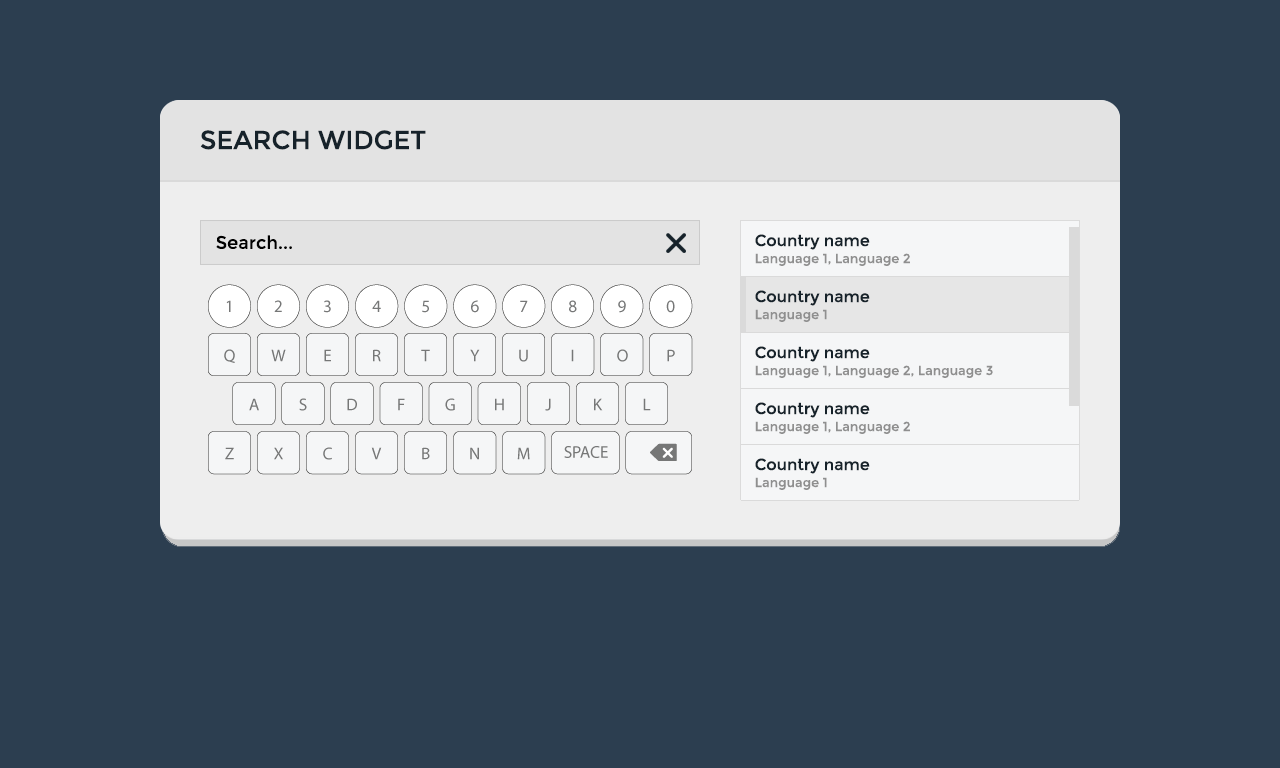
<style>
.page{position:relative;width:1280px;height:768px;background:#2c3e50}
.page>*{position:absolute;margin:0}
.t1{font:26px "Montserrat-Regular";color:#16222a}
.t2{font:18px "Montserrat-Regular";color:#000000}
.t3{font:16px "Montserrat-Regular";color:#16222a}
.t4{font:13px "Montserrat-Regular";color:#8f8f8f}
</style>
<div class="page">
<p class="t1" style="left:200px;top:130px;width:226px;height:20px">SEARCH WIDGET</p>
<p class="t2" style="left:216px;top:235px;width:76px;height:14px">Search...</p>
<p class="t3" style="left:755px;top:234px;width:115px;height:16px">Country name</p>
<p class="t4" style="left:755px;top:253px;width:155px;height:13px">Language 1, Language 2</p>
<p class="t3" style="left:755px;top:290px;width:115px;height:16px">Country name</p>
<p class="t3" style="left:755px;top:290px;width:115px;height:16px">Country name</p>
<p class="t4" style="left:755px;top:309px;width:72px;height:13px">Language 1</p>
<p class="t4" style="left:755px;top:309px;width:72px;height:13px">Language 1</p>
<p class="t3" style="left:755px;top:346px;width:115px;height:16px">Country name</p>
<p class="t4" style="left:755px;top:365px;width:238px;height:13px">Language 1, Language 2, Language 3</p>
<p class="t3" style="left:755px;top:402px;width:115px;height:16px">Country name</p>
<p class="t4" style="left:755px;top:421px;width:155px;height:13px">Language 1, Language 2</p>
<p class="t3" style="left:755px;top:458px;width:115px;height:16px">Country name</p>
<p class="t4" style="left:755px;top:477px;width:72px;height:13px">Language 1</p>
</div>
